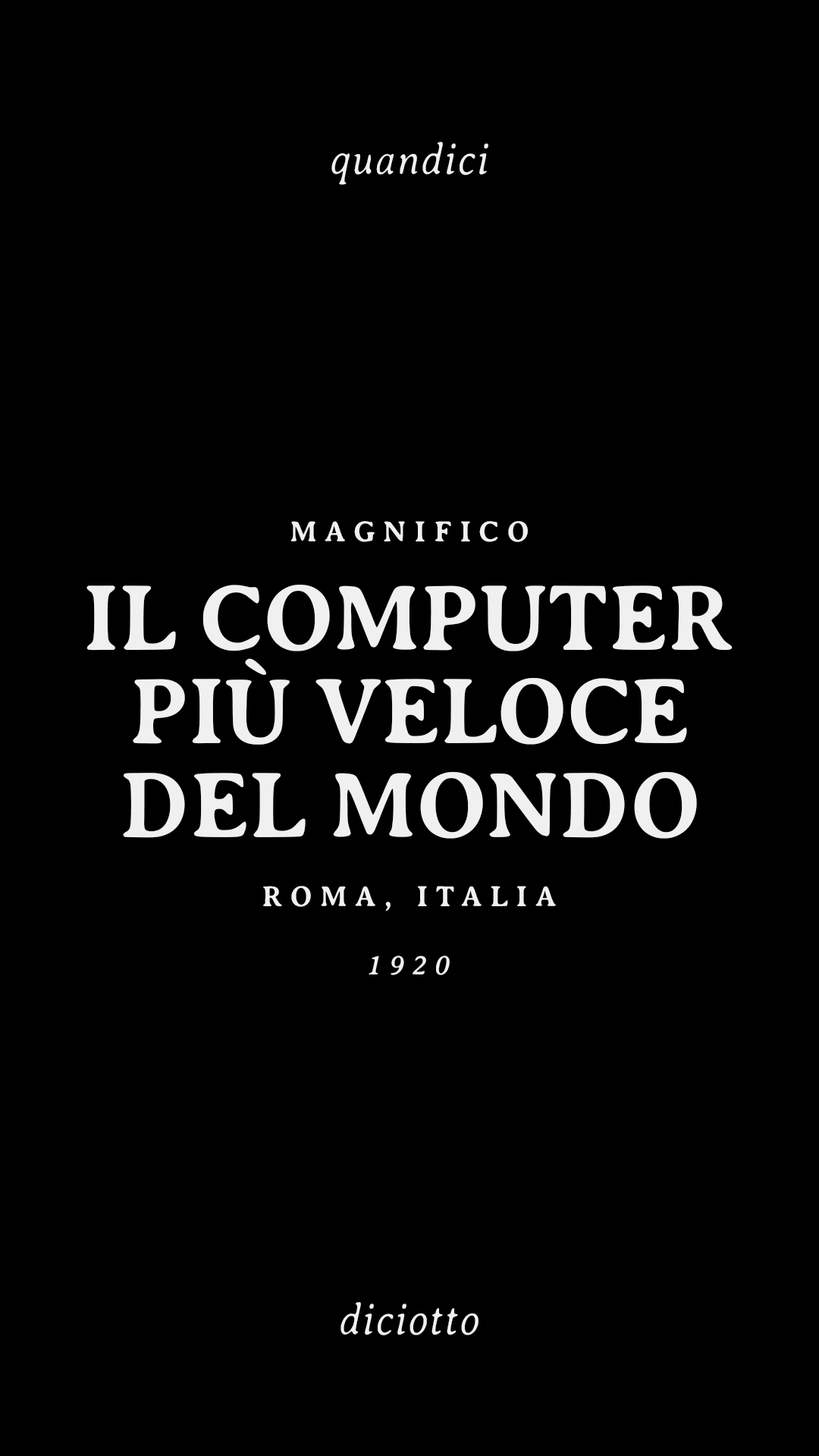
<style>
.page{position:relative;width:819px;height:1456px;background:#000000}
.page>*{position:absolute;margin:0}
.t1{font:46.4px "AveriaSerif-LightItalic";letter-spacing:0.04em;color:#f0f0f0;scale:0.87 1}
.t2{font:29.7px "AveriaSerif-Bold";letter-spacing:0.26em;color:#f0f0f0}
.t3{font:95.3px "AveriaSerif-Bold";letter-spacing:-0.02em;color:#f0f0f0;text-transform:uppercase}
.t4{font:29.6px "AveriaSerif-Bold";letter-spacing:0.26em;color:#f0f0f0}
.t5{font:28.6px "AveriaSerif-Italic";letter-spacing:0.26em;color:#f0f0f0}
</style>
<div class="page">
<p class="t1" style="left:331px;top:142px;width:157px;height:43px">quandici</p>
<p class="t2" style="left:290px;top:521px;width:238px;height:21px">MAGNIFICO</p>
<p class="t3" style="left:86px;top:585px;width:647px;height:66px">Il computer</p>
<p class="t3" style="left:133px;top:658px;width:554px;height:87px">più veloce</p>
<p class="t3" style="left:123px;top:772px;width:574px;height:67px">del mondo</p>
<p class="t4" style="left:263px;top:886px;width:293px;height:25px">ROMA, ITALIA</p>
<p class="t5" style="left:369px;top:955px;width:81px;height:20px">1920</p>
<p class="t1" style="left:340px;top:1302px;width:139px;height:33px">diciotto</p>
</div>
